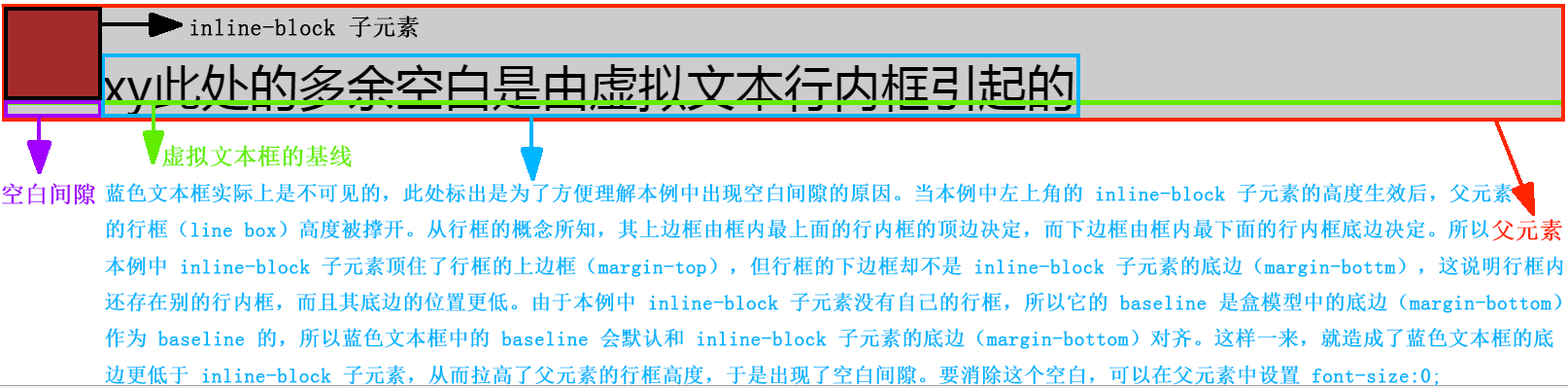
<style>
.page{position:relative;width:1568px;height:388px;background:#ffffff}
.page>*{position:absolute;margin:0}
.t1{font:23.3px "SimSun";color:#000000;font-weight:bold}
.t2{font:23.3px "SimSun";color:#61ed00;font-weight:bold}
.t3{font:23.3px "SimSun";color:#a100ff;font-weight:bold}
.t4{font:20.7px "SimSun";color:#00b4ff;font-weight:bold}
.t5{font:23.3px "SimSun";color:#ff2600;font-weight:bold}
</style>
<div class="page">
<p class="t1" style="left:190px;top:16px;width:229px;height:22px">inline-block 子元素</p>
<p class="t2" style="left:162px;top:145px;width:190px;height:22px">虚拟文本框的基线</p>
<p class="t3" style="left:2px;top:183px;width:93px;height:22px">空白间隙</p>
<p class="t4" style="left:105px;top:183px;width:1458px;height:203px">蓝色文本框实际上是不可见的，此处标出是为了方便理解本例中出现空白间隙的原因。当本例中左上角的 inline-block 子元素的高度生效后，父元素<br>的行框（line box）高度被撑开。从行框的概念所知，其上边框由框内最上面的行内框的顶边决定，而下边框由框内最下面的行内框底边决定。所以<br>本例中 inline-block 子元素顶住了行框的上边框（margin-top），但行框的下边框却不是 inline-block 子元素的底边（margin-bottm），这说明行框内<br>还存在别的行内框，而且其底边的位置更低。由于本例中 inline-block 子元素没有自己的行框，所以它的 baseline 是盒模型中的底边（margin-bottom）<br>作为 baseline 的，所以蓝色文本框中的 baseline 会默认和 inline-block 子元素的底边（margin-bottom）对齐。这样一来，就造成了蓝色文本框的底<br>边更低于 inline-block 子元素，从而拉高了父元素的行框高度，于是出现了空白间隙。要消除这个空白，可以在父元素中设置 font-size:0;</p>
<p class="t5" style="left:1492px;top:219px;width:70px;height:22px">父元素</p>
</div>
